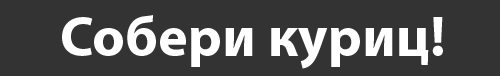
<style>
.page{position:relative;width:500px;height:76px;background:#333333}
.page>*{position:absolute;margin:0}
.t1{font:57px "MyriadPro-Bold";color:#ffffff}
</style>
<div class="page">
<p class="t1" style="left:62px;top:15px;width:381px;height:54px">Собери куриц!</p>
</div>
